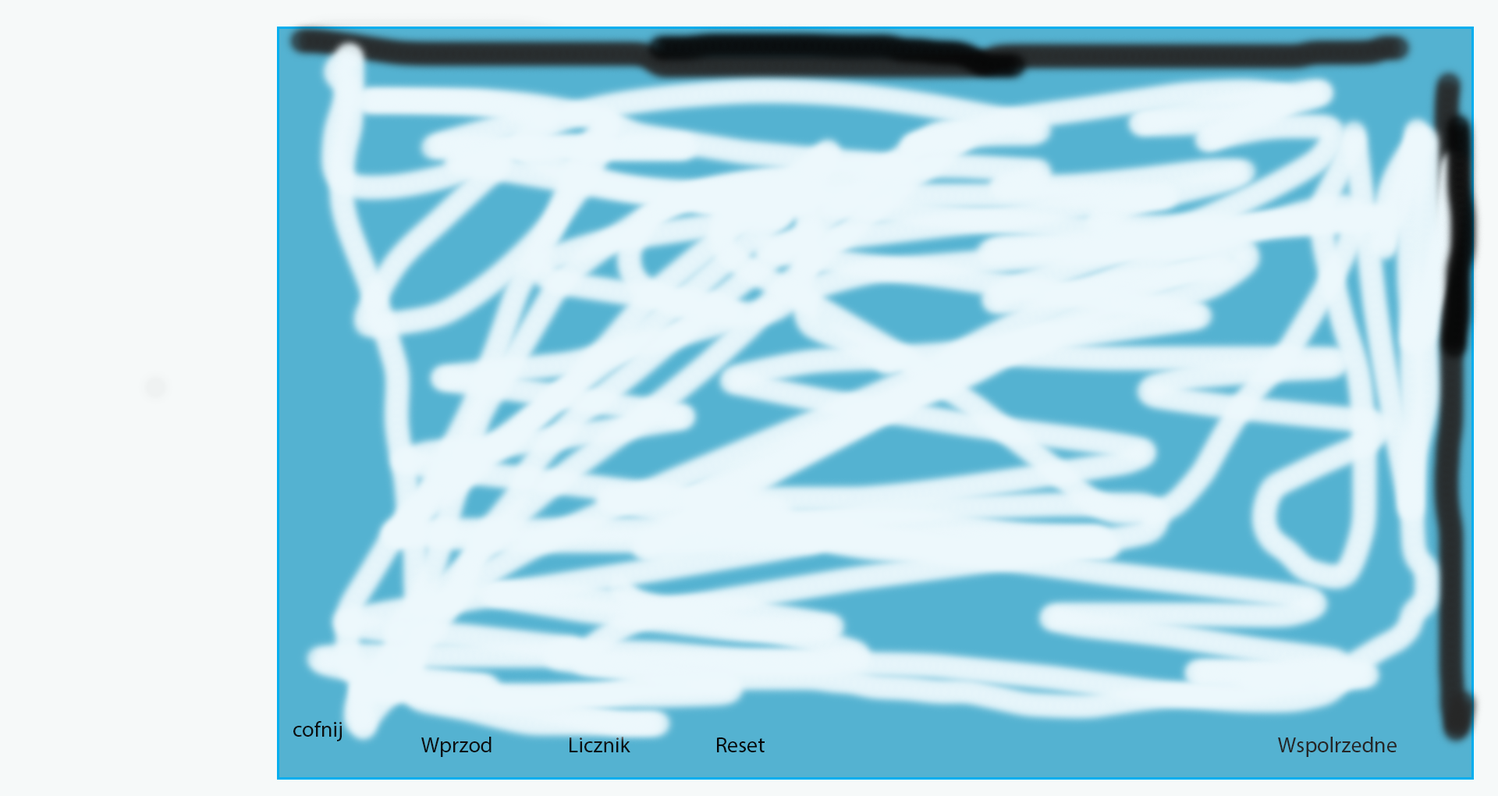
<style>
.page{position:relative;width:1498px;height:796px;background:#f6f9f9}
.page>*{position:absolute;margin:0}
.t1{font:21.8px "MyriadPro-Regular";color:#0c0d0d}
.t2{font:21.8px "MyriadPro-Regular";color:#060606}
.t3{font:21.8px "MyriadPro-Regular";color:#262626}
</style>
<div class="page">
<p class="t1" style="left:293px;top:721px;width:49px;height:20px">cofnij</p>
<p class="t1" style="left:421px;top:737px;width:71px;height:20px">Wprzod</p>
<p class="t1" style="left:570px;top:737px;width:60px;height:15px">Licznik</p>
<p class="t2" style="left:717px;top:737px;width:48px;height:15px">Reset</p>
<p class="t3" style="left:1278px;top:737px;width:119px;height:20px">Wspolrzedne</p>
</div>
